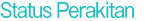
<style>
.page{position:relative;width:145px;height:21px;background:#ffffff}
.page>*{position:absolute;margin:0}
.t1{font:20px "GothicMB101Pro-Regular";letter-spacing:-0.06em;color:#1dbcc0;scale:0.9 1}
</style>
<div class="page">
<p class="t1" style="left:0px;top:1px;width:134px;height:17px">Status Perakitan</p>
</div>
